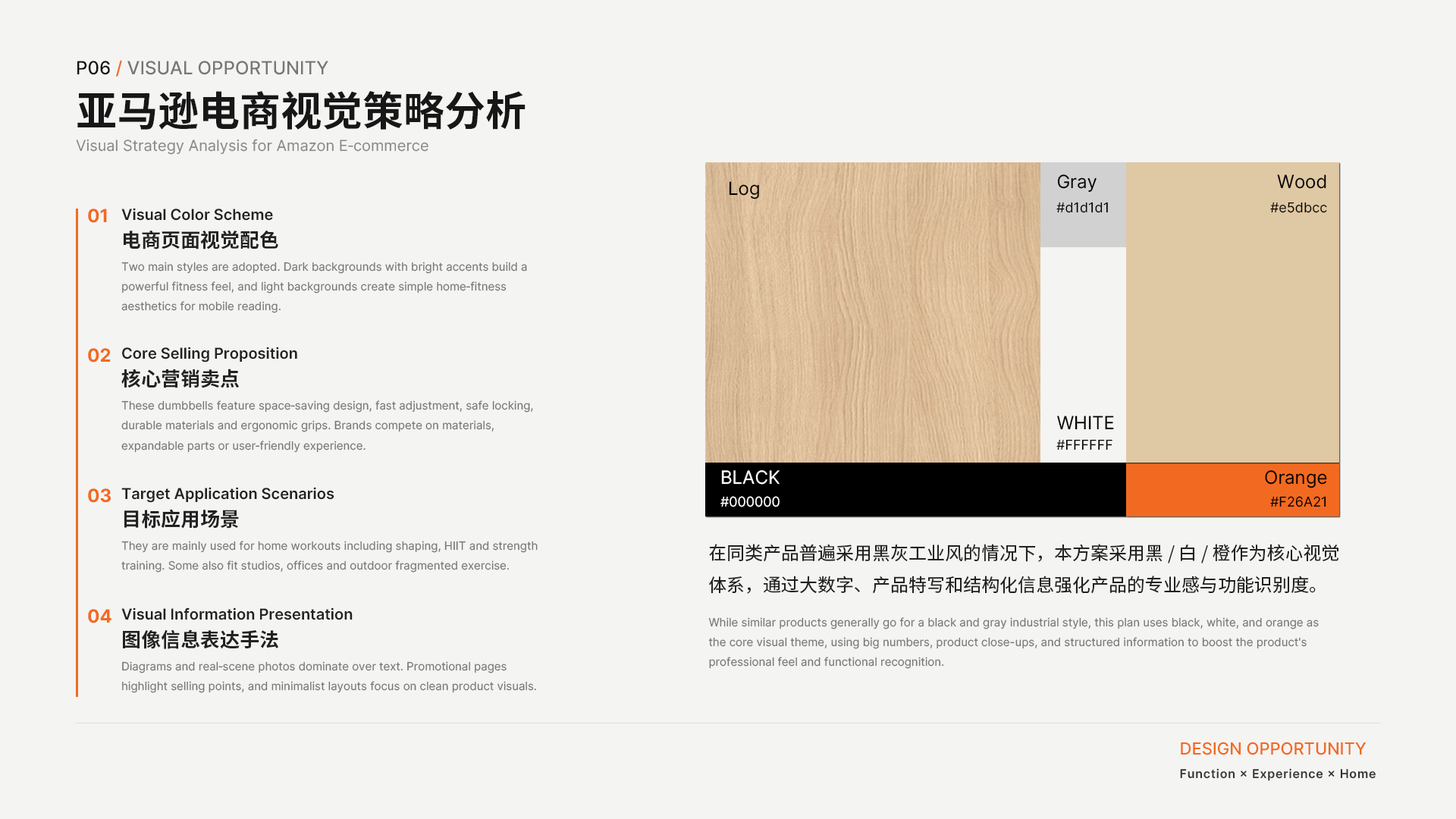
<style>
.page{position:relative;width:1456px;height:819px;background:#f4f4f2}
.page>*{position:absolute;margin:0}
.t1{font:18.2px "Inter-Medium";color:#777777}
.t2{font:18.2px "Inter-Medium";color:#111111}
.t3{font:18.2px "Inter-Medium";color:#f26a21}
.t4{font:40.9px "SourceHanSansSC-Bold";color:#171717}
.t5{font:15.2px "Inter-Regular";color:#888888}
.t6{font:18.2px "Inter-Regular";color:#000000}
.t7{font:18.2px "Inter-Bold";color:#f26a21}
.t8{font:15.2px "Inter-SemiBold";color:#222222}
.t9{font:13.6px "Inter-Regular";color:#000000}
.t10{font:19.7px "SourceHanSansSC-Bold";color:#222222}
.t11{font:11.4px "Inter-Regular";color:#777777}
.t12{font:18.2px "Inter-Regular";color:#ffffff}
.t13{font:13.6px "Inter-Regular";color:#ffffff}
.t14{font:18.2px "SourceHanSansSC-Regular";color:#222222}
.t15{font:16.7px "Inter-Medium";color:#f26a21}
.t16{font:12.1px "Inter-SemiBold";letter-spacing:0.05em;color:#333333}
</style>
<div class="page">
<p class="t1" style="left:77px;top:60px;width:251px;height:17px"><span class="t2">P06 </span><span class="t3">/ </span>VISUAL OPPORTUNITY</p>
<p class="t4" style="left:77px;top:91px;width:449px;height:39px">亚马逊电商视觉策略分析</p>
<p class="t5" style="left:76px;top:139px;width:352px;height:16px">Visual Strategy Analysis for Amazon E‑commerce</p>
<p class="t6" style="left:729px;top:181px;width:30px;height:18px">Log</p>
<p class="t6" style="left:1057px;top:174px;width:40px;height:19px">Gray</p>
<p class="t6" style="left:1277px;top:174px;width:49px;height:15px">Wood</p>
<p class="t7" style="left:88px;top:209px;width:19px;height:14px">01</p>
<p class="t8" style="left:121px;top:208px;width:152px;height:13px">Visual Color Scheme</p>
<p class="t9" style="left:1056px;top:202px;width:52px;height:11px">#d1d1d1</p>
<p class="t9" style="left:1270px;top:202px;width:57px;height:11px">#e5dbcc</p>
<p class="t10" style="left:124px;top:230px;width:154px;height:19px">电商页面视觉配色</p>
<p class="t11" style="left:121px;top:262px;width:406px;height:51px">Two main styles are adopted. Dark backgrounds with bright accents build a powerful fitness feel, and light backgrounds create simple home‑fitness aesthetics for mobile reading.</p>
<p class="t7" style="left:88px;top:348px;width:23px;height:14px">02</p>
<p class="t8" style="left:122px;top:347px;width:175px;height:15px">Core Selling Proposition</p>
<p class="t10" style="left:121px;top:369px;width:118px;height:19px">核心营销卖点</p>
<p class="t11" style="left:121px;top:400px;width:412px;height:53px">These dumbbells feature space‑saving design, fast adjustment, safe locking, durable materials and ergonomic grips. Brands compete on materials, expandable parts or user‑friendly experience.</p>
<p class="t6" style="left:1057px;top:416px;width:57px;height:14px">WHITE</p>
<p class="t9" style="left:1056px;top:439px;width:56px;height:11px">#FFFFFF</p>
<p class="t12" style="left:721px;top:470px;width:59px;height:15px">BLACK</p>
<p class="t6" style="left:1265px;top:470px;width:62px;height:18px">Orange</p>
<p class="t7" style="left:88px;top:488px;width:23px;height:15px">03</p>
<p class="t8" style="left:121px;top:487px;width:213px;height:16px">Target Application Scenarios</p>
<p class="t13" style="left:720px;top:496px;width:60px;height:11px">#000000</p>
<p class="t9" style="left:1270px;top:496px;width:56px;height:11px">#F26A21</p>
<p class="t10" style="left:124px;top:509px;width:115px;height:20px">目标应用场景</p>
<p class="t11" style="left:121px;top:541px;width:417px;height:32px">They are mainly used for home workouts including shaping, HIIT and strength training. Some also fit studios, offices and outdoor fragmented exercise.</p>
<p class="t14" style="left:709px;top:544px;width:629px;height:50px">在同类产品普遍采用黑灰工业风的情况下，本方案采用黑 / 白 / 橙作为核心视觉体系，通过大数字、产品特写和结构化信息强化产品的专业感与功能识别度。</p>
<p class="t7" style="left:88px;top:609px;width:23px;height:14px">04</p>
<p class="t8" style="left:121px;top:607px;width:232px;height:13px">Visual Information Presentation</p>
<p class="t11" style="left:708px;top:617px;width:611px;height:52px">While similar products generally go for a black and gray industrial style, this plan uses black, white, and orange as the core visual theme, using big numbers, product close-ups, and structured information to boost the product's professional feel and functional recognition.</p>
<p class="t10" style="left:123px;top:629px;width:155px;height:20px">图像信息表达手法</p>
<p class="t11" style="left:122px;top:661px;width:414px;height:32px">Diagrams and real‑scene photos dominate over text. Promotional pages highlight selling points, and minimalist layouts focus on clean product visuals.</p>
<p class="t15" style="left:1181px;top:742px;width:185px;height:13px">DESIGN OPPORTUNITY</p>
<p class="t16" style="left:1180px;top:768px;width:196px;height:13px">Function × Experience × Home</p>
</div>
